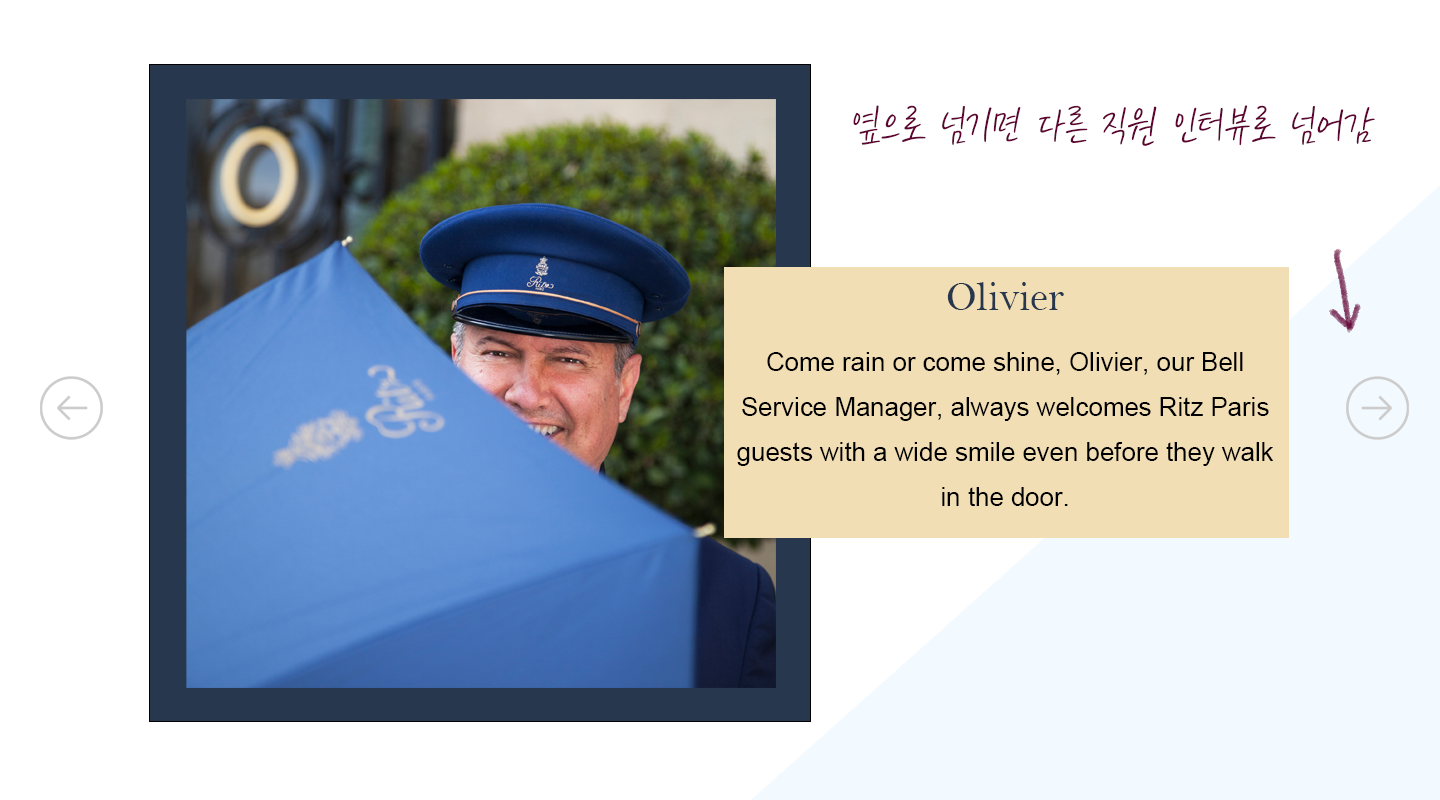
<style>
.page{position:relative;width:1440px;height:800px;background:#ffffff}
.page>*{position:absolute;margin:0}
.t1{font:50px "KCC-eunyoung-Regular";color:#5f0332}
.t2{font:25.8px "ArialMT";color:#000000}
.t3{font:41.7px "BellMT";color:#27374d}
.t4{font:41.7px "KCC-eunyoung-Regular";color:#5f0332}
</style>
<div class="page">
<p class="t1" style="left:853px;top:105px;width:522px;height:41px">옆으로 넘기면 다른 직원 인터뷰로 넘어감</p>
<p class="t2" style="left:737px;top:282px;width:537px;height:224px;text-align:center"><span class="t3">Olivier<br></span>Come rain or come shine, Olivier, our Bell Service Manager, always welcomes Ritz Paris guests with a wide smile even before they walk in the door.<br><span class="t4"><br>His excellent rapport and innate sense of service set the tone for a magnificent, warm and seamless stay.</span></p>
</div>
